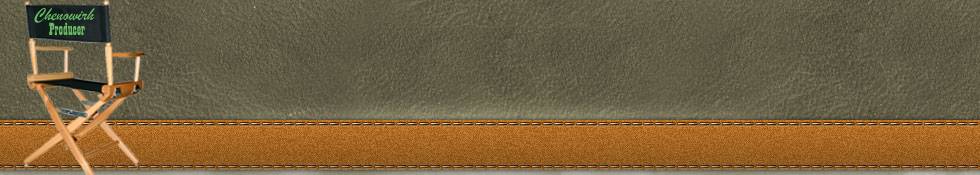
<style>
.page{position:relative;width:980px;height:175px}
.page>*{position:absolute;margin:0}
.t1{font:18.1px "BrushScriptMT";color:#6bbb63}
.t2{font:18.1px "Playbill";color:#6bbb63}
</style>
<div class="page">
<p class="t1" style="left:34px;top:8px;width:61px;height:15px">Chenowirh</p>
<p class="t2" style="left:49px;top:22px;width:36px;height:13px">Producer</p>
</div>
